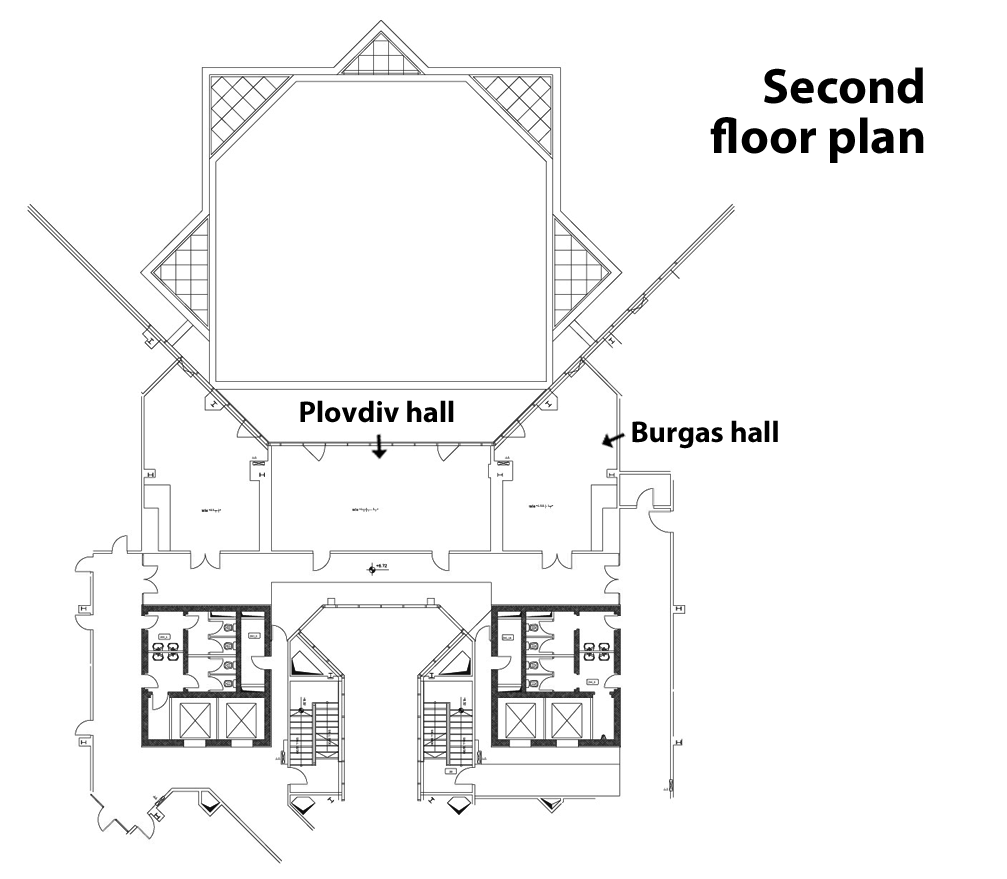
<style>
.page{position:relative;width:1007px;height:879px;background:#ffffff}
.page>*{position:absolute;margin:0}
.t1{font:50px/50px "MyriadPro-Bold";color:#000000}
.t2{font:30px "MyriadPro-Bold";color:#000000}
</style>
<div class="page">
<p class="t1" style="left:710px;top:67px;width:214px;height:96px;text-align:right">Second<br>floor plan</p>
<p class="t2" style="left:300px;top:400px;width:154px;height:23px">Plovdiv hall</p>
<p class="t2" style="left:632px;top:420px;width:146px;height:29px">Burgas hall</p>
</div>
